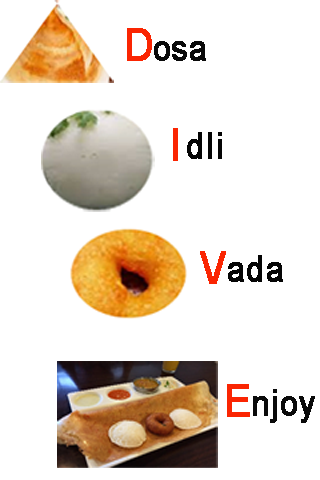
<style>
.page{position:relative;width:320px;height:480px;background:#ffffff}
.page>*{position:absolute;margin:0}
.t1{font:45px "ArialMT";color:#fa2502;font-weight:bold;scale:0.89 1}
.t2{font:36px "ArialMT";color:#0a0a0a;font-weight:bold;scale:0.89 1}
.t3{font:36px "ArialMT";color:#050505;font-weight:bold;scale:0.89 1}
</style>
<div class="page">
<p class="t1" style="left:127px;top:28px;width:25px;height:33px">D</p>
<p class="t2" style="left:154px;top:41px;width:52px;height:20px">osa</p>
<p class="t3" style="left:187px;top:132px;width:35px;height:27px">dli</p>
<p class="t1" style="left:200px;top:251px;width:26px;height:33px">V</p>
<p class="t3" style="left:228px;top:255px;width:55px;height:27px">ada</p>
<p class="t1" style="left:227px;top:384px;width:23px;height:33px">E</p>
<p class="t2" style="left:253px;top:389px;width:62px;height:34px">njoy</p>
</div>
